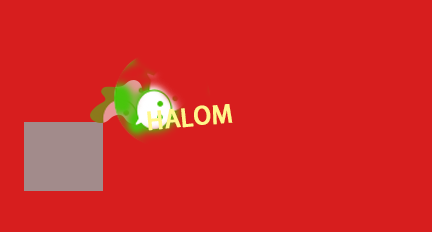
<style>
.page{position:relative;width:432px;height:232px;background:#d71e1e}
.page>*{position:absolute;margin:0}
.t1{font:24px "AdobeHeitiStd-Regular";color:#fff78c;text-transform:uppercase;font-weight:bold}
</style>
<div class="page">
<p class="t1" style="left:147px;top:104px;width:86px;height:27px;rotate:-6deg">Halom</p>
</div>
